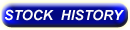
<style>
.page{position:relative;width:130px;height:30px}
.page>*{position:absolute;margin:0}
.t1{font:14px "Arial-BoldItalicMT";color:#fcfbf9}
</style>
<div class="page">
<p class="t1" style="left:5px;top:9px;width:119px;height:12px">STOCK  HISTORY</p>
</div>
